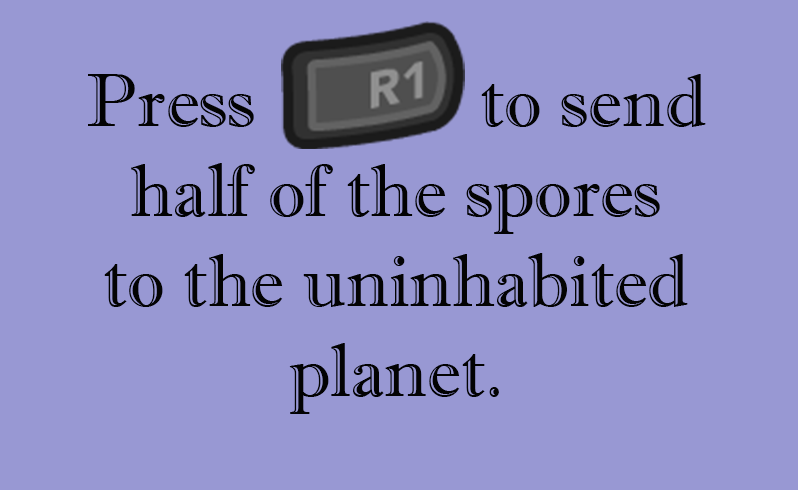
<style>
.page{position:relative;width:798px;height:490px;background:#9898d3}
.page>*{position:absolute;margin:0}
.t1{font:74.8px "ImprintMT-Shadow";color:#030303}
</style>
<div class="page">
<p class="t1" style="left:88px;top:74px;width:618px;height:340px;text-align:center">Press            to send<br> half of the spores <br>to the uninhabited<br>planet.</p>
</div>
